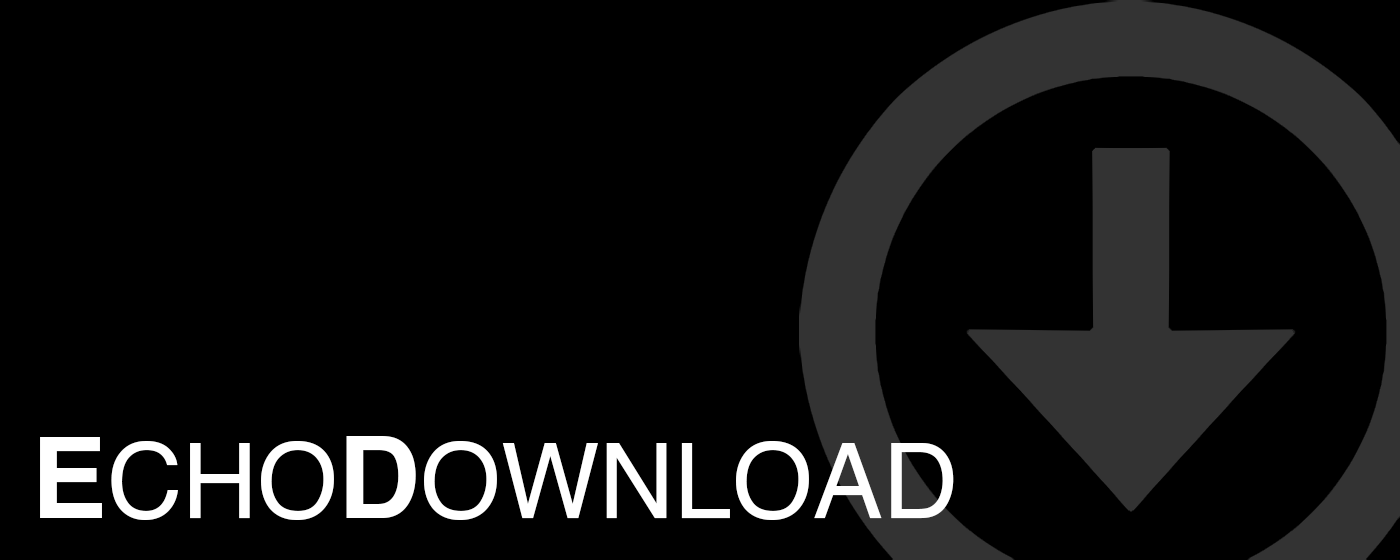
<style>
.page{position:relative;width:1400px;height:560px;background:#000000}
.page>*{position:absolute;margin:0}
.t1{font:104.2px "Helvetica";color:#ffffff;text-transform:uppercase}
.t2{font:113.4px "Helvetica-Bold";color:#ffffff}
.t3{font:113.4px "Helvetica-Bold";color:#ffffff;text-transform:uppercase}
</style>
<div class="page">
<p class="t1" style="left:40px;top:436px;width:914px;height:84px"><span class="t2">E</span>cho<span class="t3">D</span>ownload</p>
</div>
